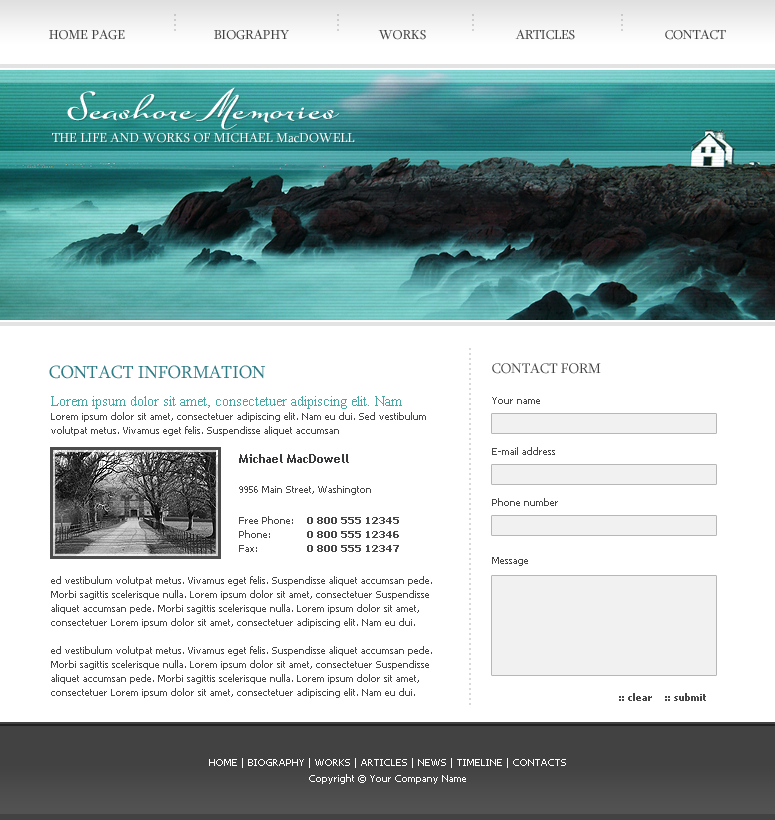
<style>
.page{position:relative;width:775px;height:820px;background:#ffffff}
.page>*{position:absolute;margin:0}
.t1{font:18.8px "Sylfaen";color:#cdcdcd}
.t2{font:13.2px "Sylfaen";color:#414141}
.t3{font:37.2px "SuaveScriptAlt-Bold";color:#ffffff}
.t4{font:13.2px "Sylfaen";color:#ffffff}
.t5{font:18.8px "Sylfaen";color:#d9d9d9}
.t6{font:18px "Sylfaen";color:#2d7b85}
.t7{font:14px "Sylfaen";color:#424242;text-transform:uppercase}
.t8{font:10px/14px "Tahoma";color:#484848}
.t9{font:14px/12px "TimesNewRomanPSMT";color:#47a8a6}
.t10{font:10px "Tahoma";color:#484848}
.t11{font:12px "TrebuchetMS-Bold";color:#393a3c}
.t12{font:10px/14px "Tahoma-Bold";color:#484848}
.t13{font:10px "Tahoma-Bold";color:#484848}
.t14{font:10px/16px "Tahoma";color:#ffffff}
</style>
<div class="page">
<p class="t1" style="left:174px;top:14px;width:2px;height:17px;rotate:90deg">....</p>
<p class="t1" style="left:337px;top:14px;width:2px;height:17px;rotate:90deg">....</p>
<p class="t1" style="left:472px;top:14px;width:2px;height:17px;rotate:90deg">....</p>
<p class="t1" style="left:621px;top:14px;width:2px;height:17px;rotate:90deg">....</p>
<p class="t2" style="left:49px;top:29px;width:76px;height:11px">HOME PAGE</p>
<p class="t2" style="left:214px;top:29px;width:75px;height:11px">BIOGRAPHY</p>
<p class="t2" style="left:378px;top:30px;width:48px;height:10px">WORKS</p>
<p class="t2" style="left:515px;top:29px;width:60px;height:11px">ARTICLES</p>
<p class="t2" style="left:665px;top:29px;width:61px;height:11px">CONTACT</p>
<p class="t3" style="left:67px;top:87px;width:273px;height:43px">Seashore Memories</p>
<p class="t4" style="left:52px;top:132px;width:303px;height:11px">THE LIFE AND WORKS OF MICHAEL MacDOWELL</p>
<p class="t5" style="left:469px;top:348px;width:2px;height:357px;rotate:90deg">........................................................................</p>
<p class="t6" style="left:49px;top:365px;width:216px;height:14px">CONTACT INFORMATION</p>
<p class="t7" style="left:492px;top:363px;width:109px;height:11px">CONTACT FORM</p>
<p class="t8" style="left:51px;top:396px;width:375px;height:40px"><span class="t9">Lorem ipsum dolor sit amet, consectetuer adipiscing elit. Nam<br></span>Lorem ipsum dolor sit amet, consectetuer adipiscing elit. Nam eu dui. Sed vestibulum volutpat metus. Vivamus eget felis. Suspendisse aliquet accumsan</p>
<p class="t10" style="left:492px;top:397px;width:48px;height:7px">Your name</p>
<p class="t10" style="left:492px;top:447px;width:63px;height:8px">E-mail address</p>
<p class="t11" style="left:239px;top:454px;width:110px;height:9px">Michael MacDowell</p>
<p class="t10" style="left:239px;top:485px;width:132px;height:10px">9956 Main Street, Washington</p>
<p class="t10" style="left:492px;top:498px;width:66px;height:8px">Phone number</p>
<p class="t8" style="left:239px;top:516px;width:54px;height:36px">Free Phone:<br>Phone:<br>Fax:</p>
<p class="t12" style="left:307px;top:517px;width:92px;height:35px;text-align:right">0 800 555 12345<br>0 800 555 12346<br>0 800 555 12347</p>
<p class="t10" style="left:492px;top:557px;width:36px;height:9px">Message</p>
<p class="t8" style="left:51px;top:576px;width:381px;height:122px">ed vestibulum volutpat metus. Vivamus eget felis. Suspendisse aliquet accumsan pede. Morbi sagittis scelerisque nulla. Lorem ipsum dolor sit amet, consectetuer Suspendisse aliquet accumsan pede. Morbi sagittis scelerisque nulla. Lorem ipsum dolor sit amet, consectetuer Lorem ipsum dolor sit amet, consectetuer adipiscing elit. Nam eu dui.<br><br>ed vestibulum volutpat metus. Vivamus eget felis. Suspendisse aliquet accumsan pede. Morbi sagittis scelerisque nulla. Lorem ipsum dolor sit amet, consectetuer Suspendisse aliquet accumsan pede. Morbi sagittis scelerisque nulla. Lorem ipsum dolor sit amet, consectetuer Lorem ipsum dolor sit amet, consectetuer adipiscing elit. Nam eu dui.</p>
<p class="t13" style="left:619px;top:693px;width:87px;height:8px">:: clear    :: submit</p>
<p class="t14" style="left:209px;top:758px;width:357px;height:26px;text-align:center">HOME | BIOGRAPHY | WORKS | ARTICLES | NEWS | TIMELINE | CONTACTS<br>Copyright © Your Company Name</p>
</div>
